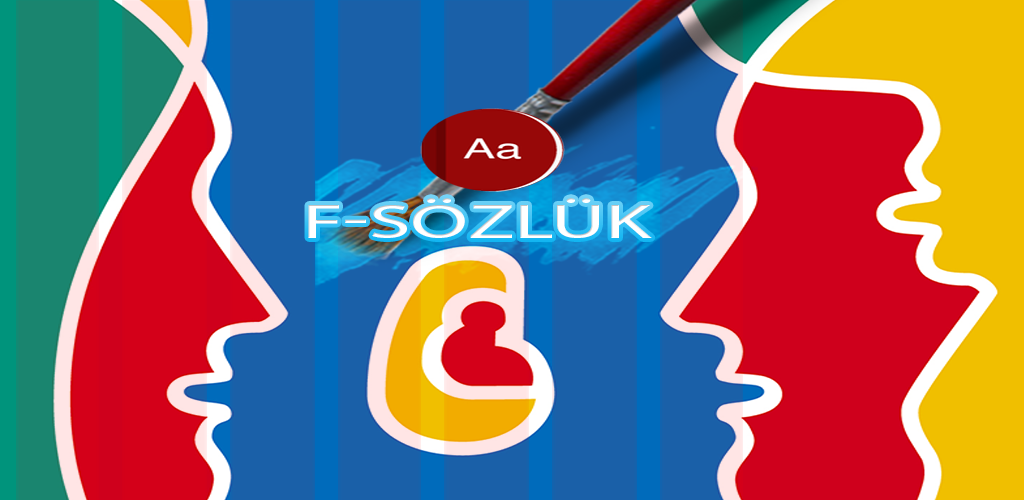
<style>
.page{position:relative;width:1024px;height:500px;background:#1a60a8}
.page>*{position:absolute;margin:0}
.t1{font:48.2px "MyriadPro-Regular";color:#f2f6fc;text-transform:uppercase;scale:1.74 1}
</style>
<div class="page">
<p class="t1" style="left:308px;top:198px;width:344px;height:40px">F-Sözlük</p>
</div>
